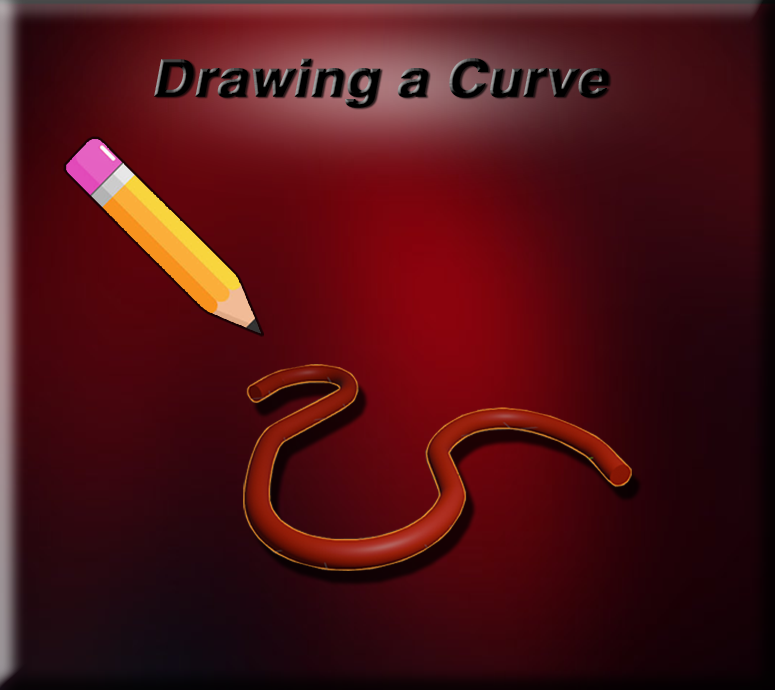
<style>
.page{position:relative;width:775px;height:690px}
.page>*{position:absolute;margin:0}
.t1{font:51px "HelveticaLTStd-Bold";color:#000000;font-weight:bold;font-style:italic;scale:1.08 1}
</style>
<div class="page">
<p class="t1" style="left:154px;top:58px;width:455px;height:50px">Drawing a Curve</p>
</div>
